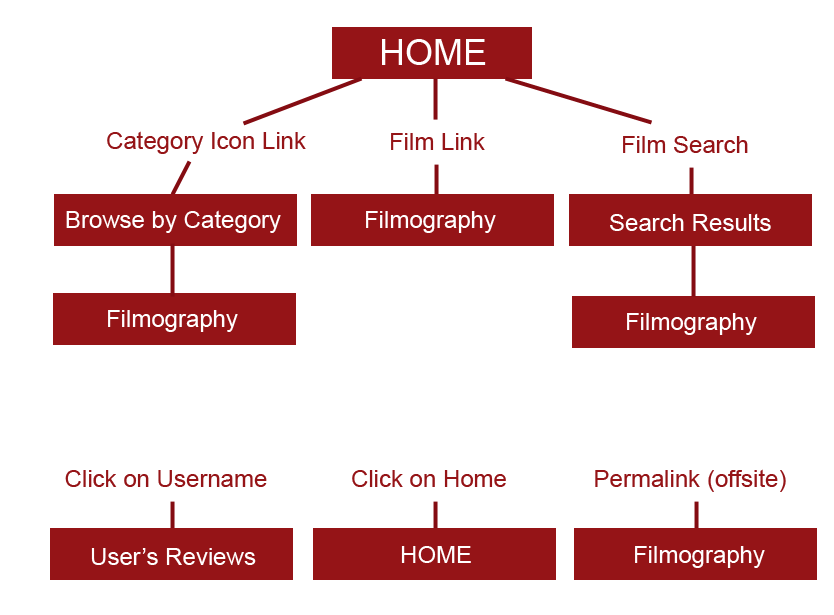
<style>
.page{position:relative;width:834px;height:615px;background:#ffffff}
.page>*{position:absolute;margin:0}
.t1{font:36px "ArialMT";color:#ffffff}
.t2{font:24px "ArialMT";color:#951417}
.t3{font:24px "ArialMT";color:#ffffff}
</style>
<div class="page">
<p class="t1" style="left:382px;top:39px;width:104px;height:26px">HOME</p>
<p class="t2" style="left:107px;top:131px;width:199px;height:23px">Category Icon Link</p>
<p class="t2" style="left:391px;top:133px;width:94px;height:17px">Film Link</p>
<p class="t2" style="left:623px;top:136px;width:125px;height:17px">Film Search</p>
<p class="t3" style="left:66px;top:210px;width:215px;height:23px">Browse by Category</p>
<p class="t3" style="left:366px;top:211px;width:130px;height:22px">Filmography</p>
<p class="t3" style="left:610px;top:213px;width:161px;height:18px">Search Results</p>
<p class="t3" style="left:108px;top:310px;width:130px;height:22px">Filmography</p>
<p class="t3" style="left:627px;top:313px;width:130px;height:22px">Filmography</p>
<p class="t2" style="left:65px;top:470px;width:202px;height:17px">Click on Username</p>
<p class="t2" style="left:352px;top:470px;width:154px;height:17px">Click on Home</p>
<p class="t2" style="left:595px;top:469px;width:191px;height:23px">Permalink (offsite)</p>
<p class="t3" style="left:91px;top:548px;width:165px;height:17px">User’s Reviews</p>
<p class="t3" style="left:401px;top:546px;width:70px;height:17px">HOME</p>
<p class="t3" style="left:635px;top:546px;width:130px;height:22px">Filmography</p>
</div>
